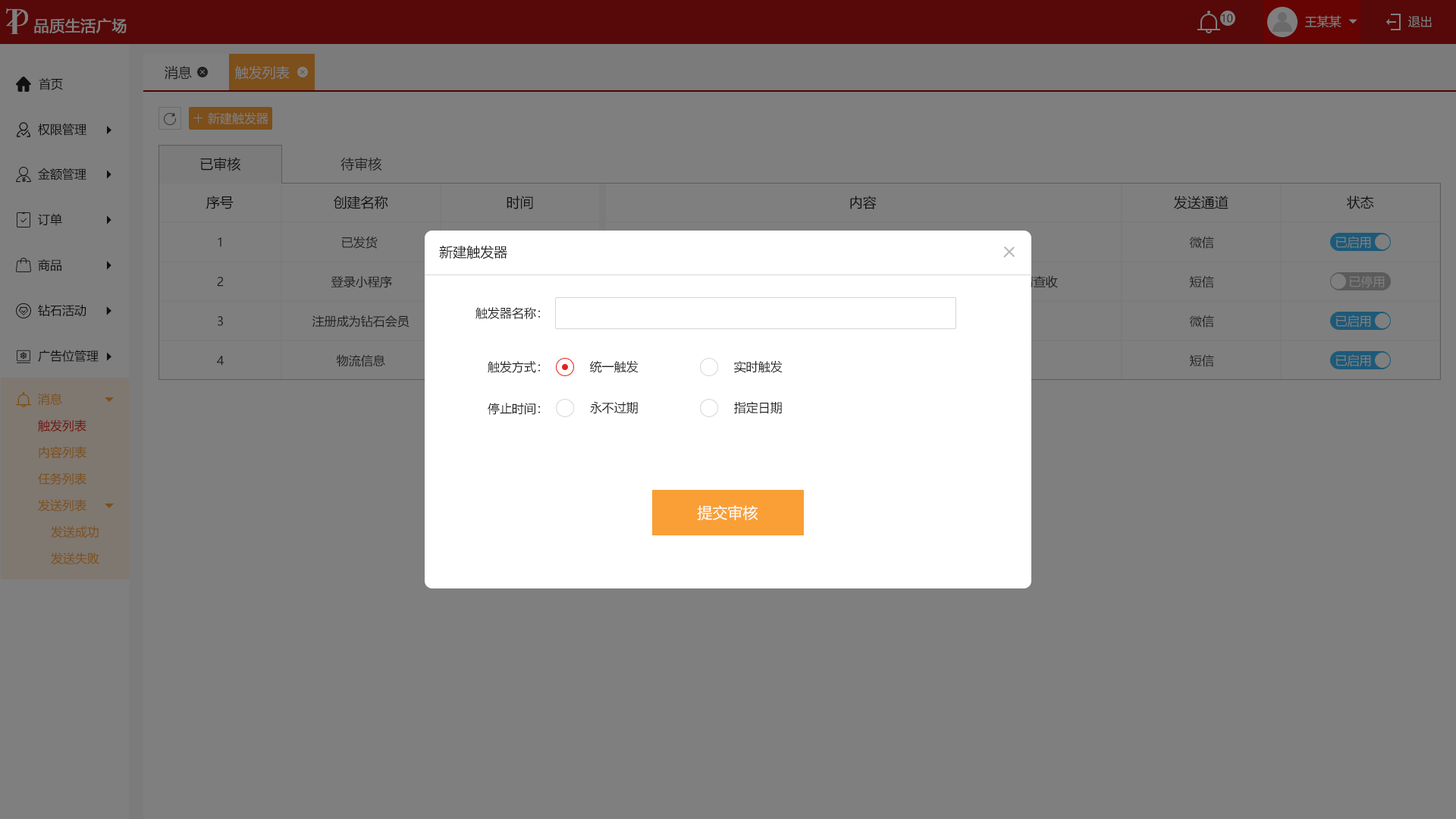
<style>
.page{position:relative;width:1456px;height:819px;background:#7f7f7f}
.page>*{position:absolute;margin:0}
.t1{font:10.6px "MicrosoftYaHei";color:#4e0303;text-transform:uppercase}
.t2{font:12.1px "MicrosoftYaHei";color:#7f7f7f;text-transform:uppercase}
.t3{font:15.2px "MicrosoftYaHei";color:#7f7f7f;text-transform:uppercase;font-weight:bold}
.t4{font:13.6px "MicrosoftYaHei";color:#202020;text-transform:uppercase}
.t5{font:13.6px "MicrosoftYaHei";color:#7f7f7f;text-transform:uppercase}
.t6{font:12.1px "MicrosoftYaHei";color:#202020;text-transform:uppercase}
.t7{font:12.1px "MicrosoftYaHei";color:#7c4f1b;text-transform:uppercase}
.t8{font:12.1px "MicrosoftYaHei";color:#730f0c;text-transform:uppercase}
.t9{font:15.2px "MicrosoftYaHei";color:#ffffff}
</style>
<div class="page">
<p class="t1" style="left:1222px;top:14px;width:11px;height:9px">10</p>
<p class="t2" style="left:1305px;top:15px;width:36px;height:13px">王某某</p>
<p class="t2" style="left:1408px;top:16px;width:24px;height:11px">退出</p>
<p class="t3" style="left:34px;top:18px;width:93px;height:15px">品质生活广场</p>
<p class="t4" style="left:165px;top:66px;width:27px;height:14px">消息</p>
<p class="t5" style="left:235px;top:66px;width:55px;height:14px">触发列表</p>
<p class="t6" style="left:39px;top:78px;width:24px;height:12px">首页</p>
<p class="t2" style="left:208px;top:112px;width:60px;height:12px">新建触发器</p>
<p class="t6" style="left:38px;top:123px;width:48px;height:13px">权限管理</p>
<p class="t4" style="left:200px;top:157px;width:41px;height:14px">已审核</p>
<p class="t4" style="left:340px;top:157px;width:42px;height:14px">待审核</p>
<p class="t6" style="left:38px;top:168px;width:48px;height:12px">金额管理</p>
<p class="t4" style="left:206px;top:196px;width:28px;height:13px">序号</p>
<p class="t4" style="left:334px;top:196px;width:54px;height:13px">创建名称</p>
<p class="t4" style="left:507px;top:196px;width:26px;height:13px">时间</p>
<p class="t4" style="left:850px;top:196px;width:27px;height:13px">内容</p>
<p class="t4" style="left:1174px;top:196px;width:54px;height:13px">发送通道</p>
<p class="t4" style="left:1346px;top:196px;width:28px;height:13px">状态</p>
<p class="t6" style="left:38px;top:213px;width:24px;height:13px">订单</p>
<p class="t6" style="left:218px;top:237px;width:3px;height:10px">1</p>
<p class="t6" style="left:342px;top:236px;width:36px;height:13px">已发货</p>
<p class="t4" style="left:439px;top:245px;width:68px;height:14px">新建触发器</p>
<p class="t6" style="left:1190px;top:236px;width:24px;height:13px">微信</p>
<p class="t2" style="left:1335px;top:236px;width:36px;height:13px">已启用</p>
<p class="t6" style="left:38px;top:259px;width:23px;height:12px">商品</p>
<p class="t6" style="left:217px;top:277px;width:7px;height:10px">2</p>
<p class="t6" style="left:331px;top:275px;width:61px;height:13px">登录小程序</p>
<p class="t6" style="left:1190px;top:275px;width:24px;height:13px">短信</p>
<p class="t2" style="left:1349px;top:275px;width:36px;height:13px">已停用</p>
<p class="t6" style="left:38px;top:304px;width:48px;height:12px">钻石活动</p>
<p class="t6" style="left:218px;top:316px;width:5px;height:10px">3</p>
<p class="t6" style="left:312px;top:315px;width:97px;height:13px">注册成为钻石会员</p>
<p class="t6" style="left:475px;top:307px;width:65px;height:12px">触发器名称：</p>
<p class="t6" style="left:1190px;top:315px;width:24px;height:13px">微信</p>
<p class="t2" style="left:1335px;top:315px;width:36px;height:13px">已启用</p>
<p class="t6" style="left:38px;top:350px;width:61px;height:12px">广告位管理</p>
<p class="t6" style="left:217px;top:356px;width:7px;height:10px">4</p>
<p class="t6" style="left:336px;top:354px;width:49px;height:13px">物流信息</p>
<p class="t6" style="left:488px;top:361px;width:52px;height:12px">触发方式：</p>
<p class="t6" style="left:590px;top:360px;width:49px;height:13px">统一触发</p>
<p class="t6" style="left:734px;top:360px;width:49px;height:13px">实时触发</p>
<p class="t6" style="left:1190px;top:354px;width:24px;height:13px">短信</p>
<p class="t2" style="left:1335px;top:354px;width:36px;height:13px">已启用</p>
<p class="t7" style="left:38px;top:393px;width:24px;height:12px">消息</p>
<p class="t6" style="left:590px;top:401px;width:48px;height:13px">永不过期</p>
<p class="t6" style="left:734px;top:401px;width:48px;height:13px">指定日期</p>
<p class="t6" style="left:488px;top:403px;width:52px;height:12px">停止时间：</p>
<p class="t8" style="left:38px;top:419px;width:48px;height:12px">触发列表</p>
<p class="t7" style="left:39px;top:446px;width:47px;height:13px">内容列表</p>
<p class="t7" style="left:38px;top:472px;width:48px;height:13px">任务列表</p>
<p class="t7" style="left:38px;top:499px;width:48px;height:12px">发送列表</p>
<p class="t9" style="left:697px;top:505px;width:61px;height:15px">提交审核</p>
<p class="t7" style="left:51px;top:526px;width:48px;height:12px">发送成功</p>
<p class="t7" style="left:51px;top:552px;width:48px;height:13px">发送失败</p>
</div>
